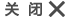
<style>
.page{position:relative;width:65px;height:17px;background:#ffffff}
.page>*{position:absolute;margin:0}
.t1{font:14px "MicrosoftYaHei";color:#4b4b4b;font-weight:bold}
</style>
<div class="page">
<p class="t1" style="left:5px;top:2px;width:37px;height:15px">关  闭</p>
</div>
